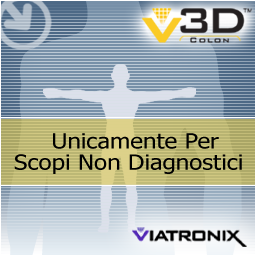
<style>
.page{position:relative;width:256px;height:256px}
.page>*{position:absolute;margin:0}
.t1{font:21px/21px "Tahoma";color:#000000;scale:1.14 1}
</style>
<div class="page">
<p class="t1" style="left:14px;top:133px;width:228px;height:41px">Unicamente Per<br>Scopi Non Diagnostici</p>
</div>
